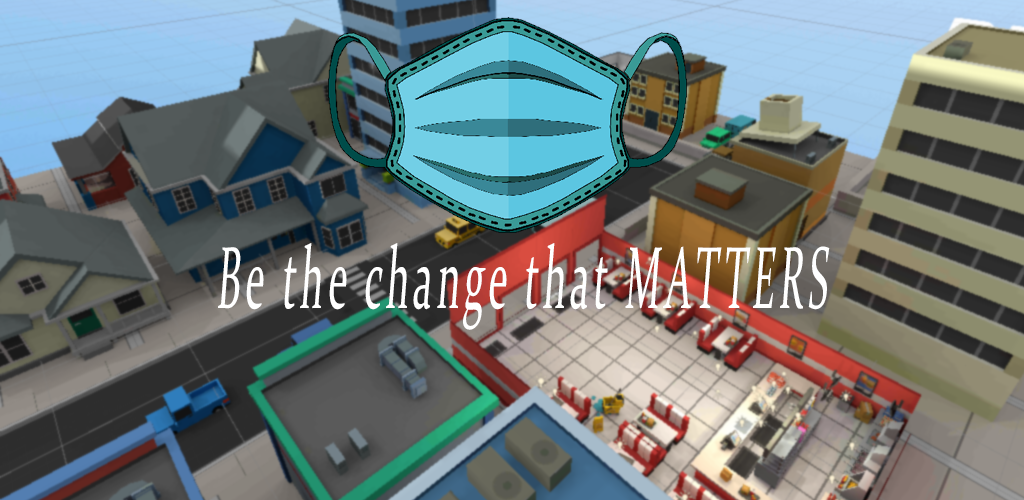
<style>
.page{position:relative;width:1024px;height:500px}
.page>*{position:absolute;margin:0}
.t1{font:88.5px "Constantia";letter-spacing:0.12em;color:#ffffff;font-style:italic;scale:0.44 1}
</style>
<div class="page">
<p class="t1" style="left:218px;top:243px;width:612px;height:87px">Be the change that MATTERS</p>
</div>
